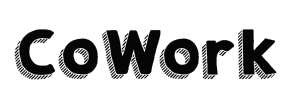
<style>
.page{position:relative;width:291px;height:109px;background:#ffffff}
.page>*{position:absolute;margin:0}
.t1{font:54.2px "KGHAPPY";color:#060606}
</style>
<div class="page">
<p class="t1" style="left:14px;top:29px;width:263px;height:51px">CoWork</p>
</div>
